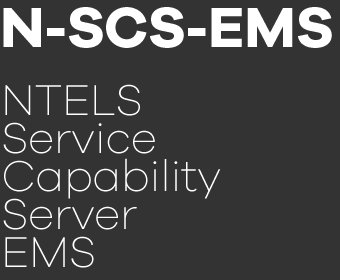
<style>
.page{position:relative;width:340px;height:280px;background:#333333}
.page>*{position:absolute;margin:0}
.t1{font:58.5px "GalanoGrotesque-Bold";letter-spacing:-0.01em;color:#ffffff}
.t2{font:58.5px "GalanoGrotesque-Bold";letter-spacing:-0.01em;color:#ffffff;scale:0.9 1}
.t3{font:44.5px/38px "GalanoGrotesque-ExtraLight";letter-spacing:-0.01em;color:#ffffff}
</style>
<div class="page">
<p class="t1" style="left:3px;top:7px;width:329px;height:41px">N<span class="t2">-</span>SCS<span class="t2">-</span>EMS</p>
<p class="t3" style="left:3px;top:84px;width:218px;height:184px">NTELS<br>Service <br>Capability <br>Server <br>EMS</p>
</div>
